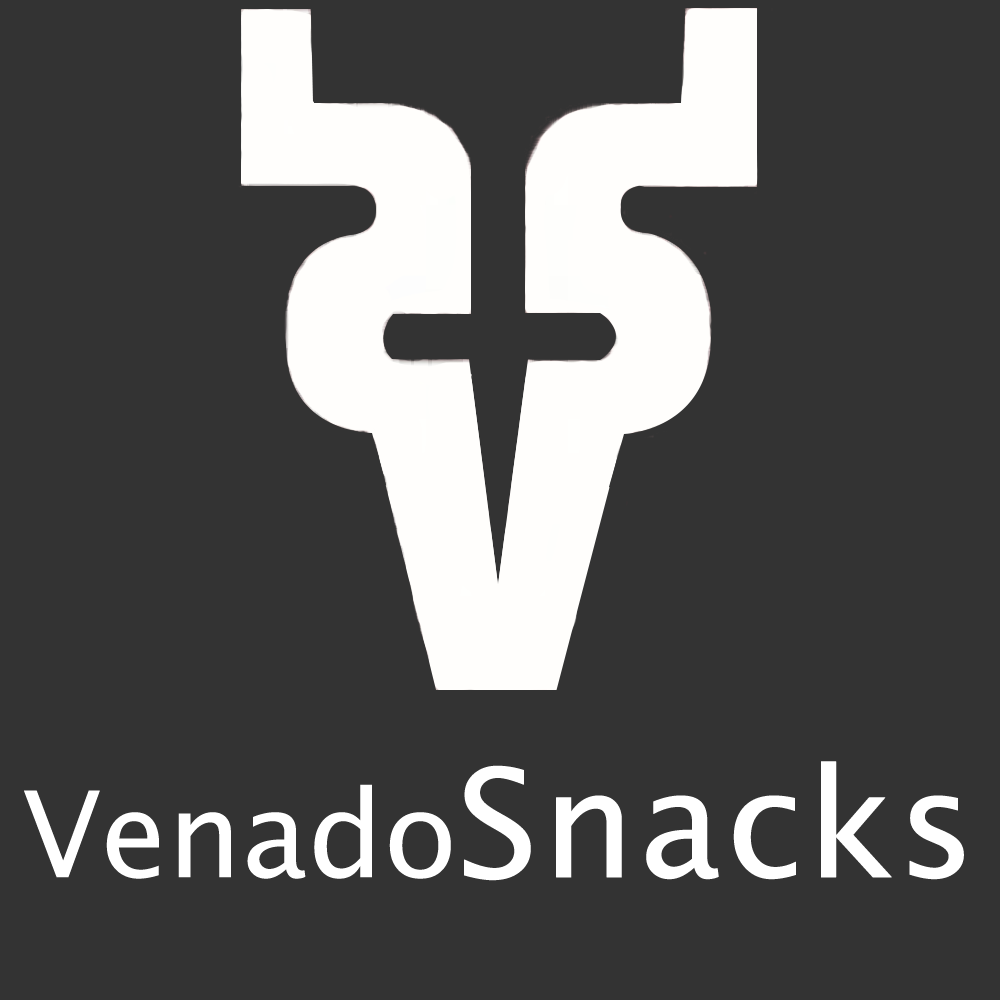
<style>
.page{position:relative;width:1000px;height:1000px;background:#333333}
.page>*{position:absolute;margin:0}
.t1{font:119.9px "LucidaSansUnicode";color:#ffffff}
.t2{font:149.8px "LucidaSansUnicode";color:#ffffff;font-weight:bold}
</style>
<div class="page">
<p class="t1" style="left:24px;top:761px;width:940px;height:120px">Venado<span class="t2">Snacks</span></p>
</div>
